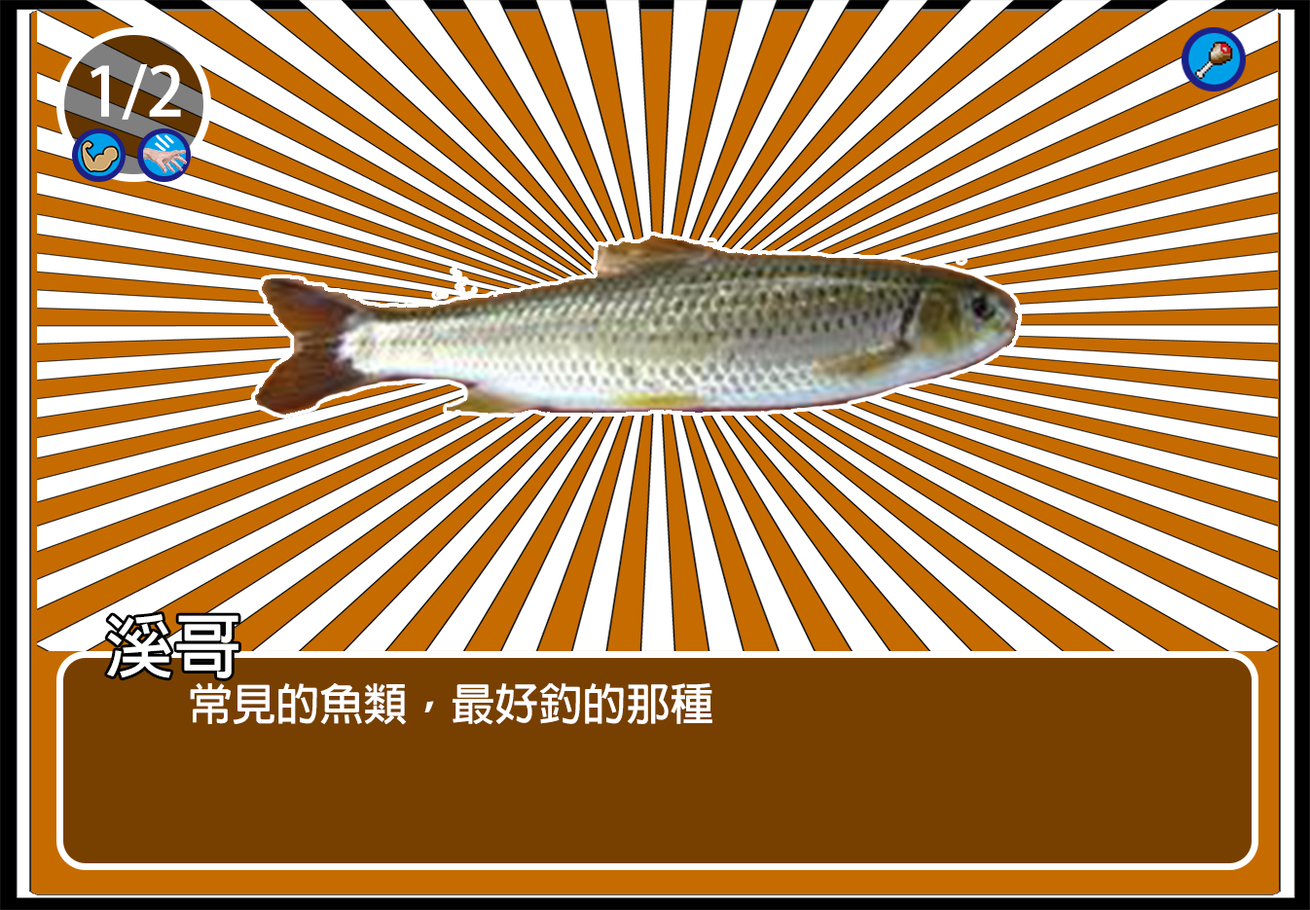
<style>
.page{position:relative;width:1310px;height:910px;background:#ffffff}
.page>*{position:absolute;margin:0}
.t1{font:66.9px "AdobeFanHeitiStd-Bold";color:#ffffff}
.t2{font:68.1px "AdobeFanHeitiStd-Bold";color:#ffffff}
.t3{font:43.8px "AdobeFanHeitiStd-Bold";color:#ffffff}
</style>
<div class="page">
<p class="t1" style="left:91px;top:64px;width:90px;height:56px">1/2</p>
<p class="t2" style="left:107px;top:614px;width:131px;height:64px">溪哥</p>
<p class="t3" style="left:190px;top:683px;width:523px;height:42px">常見的魚類，最好釣的那種</p>
</div>
